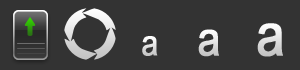
<style>
.page{position:relative;width:300px;height:70px;background:#333333}
.page>*{position:absolute;margin:0}
.t1{font:48px "ArialNarrow";letter-spacing:0.01em;font-weight:bold}
.t2{font:60px "ArialNarrow";letter-spacing:0.01em;font-weight:bold}
.t3{font:36px "ArialNarrow";letter-spacing:0.01em;font-weight:bold}
</style>
<div class="page">
<p class="t1" style="left:198px;top:29px;width:21px;height:28px">a</p>
<p class="t2" style="left:257px;top:23px;width:26px;height:34px">a</p>
<p class="t3" style="left:142px;top:36px;width:16px;height:20px">a</p>
</div>
